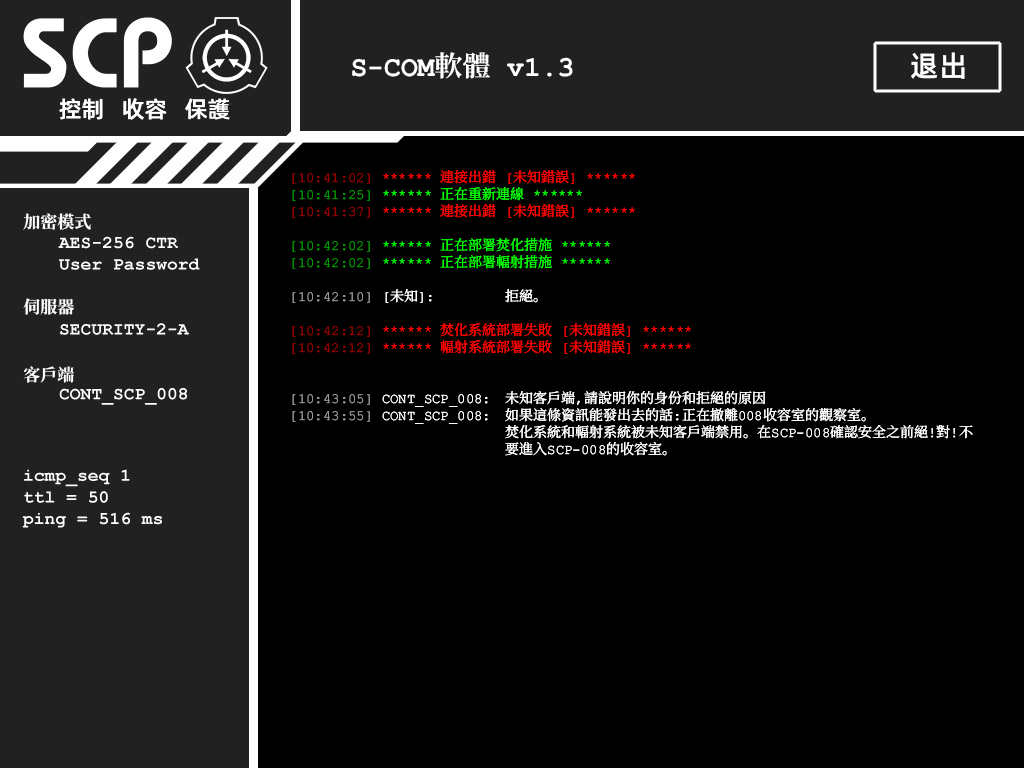
<style>
.page{position:relative;width:1024px;height:768px;background:#000000}
.page>*{position:absolute;margin:0}
.t1{font:28px "ContainmentBreach-Bold";color:#ffffff}
.t2{font:29px "AlibabaPuHuiTiM";color:#ffffff}
.t3{font:23px "AlibabaPuHuiTiM";color:#ffffff}
.t4{font:14px/17px "ContainmentBreach-Regular";color:#ffffff}
.t5{font:14px/17px "ContainmentBreach-Regular";color:#960000}
.t6{font:14px/17px "ContainmentBreach-Regular";color:#ff0000}
.t7{font:14px/17px "ContainmentBreach-Regular";color:#009600}
.t8{font:14px/17px "ContainmentBreach-Regular";color:#00ff00}
.t9{font:14px/17px "ContainmentBreach-Regular";color:#969696}
.t10{font:17px/17px "ContainmentBreach-Bold";color:#ffffff}
</style>
<div class="page">
<p class="t1" style="left:352px;top:52px;width:221px;height:27px">S-COM軟體 v1.3</p>
<p class="t2" style="left:911px;top:52px;width:54px;height:27px">退出</p>
<p class="t3" style="left:59px;top:98px;width:171px;height:22px">控制   收容   保護</p>
<p class="t4" style="left:292px;top:170px;width:681px;height:286px"><span class="t5">[10:41:02]</span><span class="t6"> ****** 連接出錯 [未知錯誤] ******<br></span><span class="t7">[10:41:25]</span><span class="t8"> ****** 正在重新連線 ******<br></span><span class="t5">[10:41:37]</span><span class="t6"> ****** 連接出錯 [未知錯誤] ******<br><br></span><span class="t7">【10:42:02】</span><span class="t8"> ****** 正在部署焚化措施 ******<br></span><span class="t7">【10:42:02】 </span><span class="t8">****** 正在部署輻射措施 ******<br><br></span><span class="t9">【10:42:10】</span> 【未知】：  拒絕。<br><br><span class="t5">【10:42:12】</span><span class="t6"> ****** 焚化系統部署失敗 【未知錯誤】 ******<br></span><span class="t5">【10:42:12】</span><span class="t6"> ****** 輻射系統部署失敗 【未知錯誤】 ******<br><br><br></span><span class="t9">【10:43:05】</span> CONT_SCP_008： 未知客戶端，請說明你的身份和拒絕的原因<br><span class="t9">【10:43:55】</span> CONT_SCP_008： 如果這條資訊能發出去的話：正在撤離008收容室的觀察室。<br>      焚化系統和輻射系統被未知客戶端禁用。在SCP-008確認安全之前絕！對！不<br>      要進入SCP-008的收容室。</p>
<p class="t10" style="left:23px;top:213px;width:68px;height:170px">加密模式<br><br><br><br><br>伺服器<br><br><br><br>客戶端</p>
</div>
